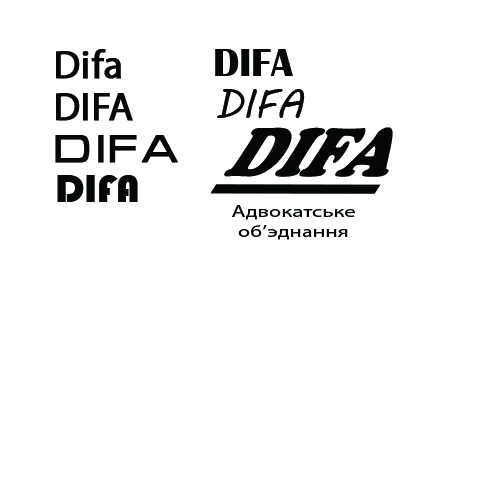
<style>
.page{position:relative;width:500px;height:500px;background:#ffffff}
.page>*{position:absolute;margin:0}
.t1{font:40px "MyriadPro-Regular";color:#060809;font-weight:bold}
.t2{font:40px "BritannicBold";color:#060809}
.t3{font:40px "MVBoli";color:#060809}
.t4{font:40px "Micra";color:#060809;font-weight:bold}
.t5{font:84.1px "CooperBlack";color:#060708;text-decoration:underline;scale:0.74 1}
.t6{font:40px "Bauhaus93";color:#060809}
.t7{font:16.6px "MyriadPro-Regular";color:#050708;scale:1.37 1}
</style>
<div class="page">
<p class="t1" style="left:56px;top:49px;width:65px;height:30px">Difa</p>
<p class="t2" style="left:215px;top:49px;width:78px;height:27px">DIFA</p>
<p class="t3" style="left:217px;top:89px;width:88px;height:29px">DIFA</p>
<p class="t1" style="left:56px;top:93px;width:77px;height:28px">DIFA</p>
<p class="t4" style="left:55px;top:135px;width:123px;height:28px">DIFA</p>
<p class="t5" style="left:210px;top:127px;width:183px;height:67px">DIFA</p>
<p class="t6" style="left:57px;top:175px;width:81px;height:27px">DIFA</p>
<p class="t7" style="left:232px;top:205px;width:123px;height:35px;text-align:center">Адвокатське<br>об’эднання</p>
</div>
